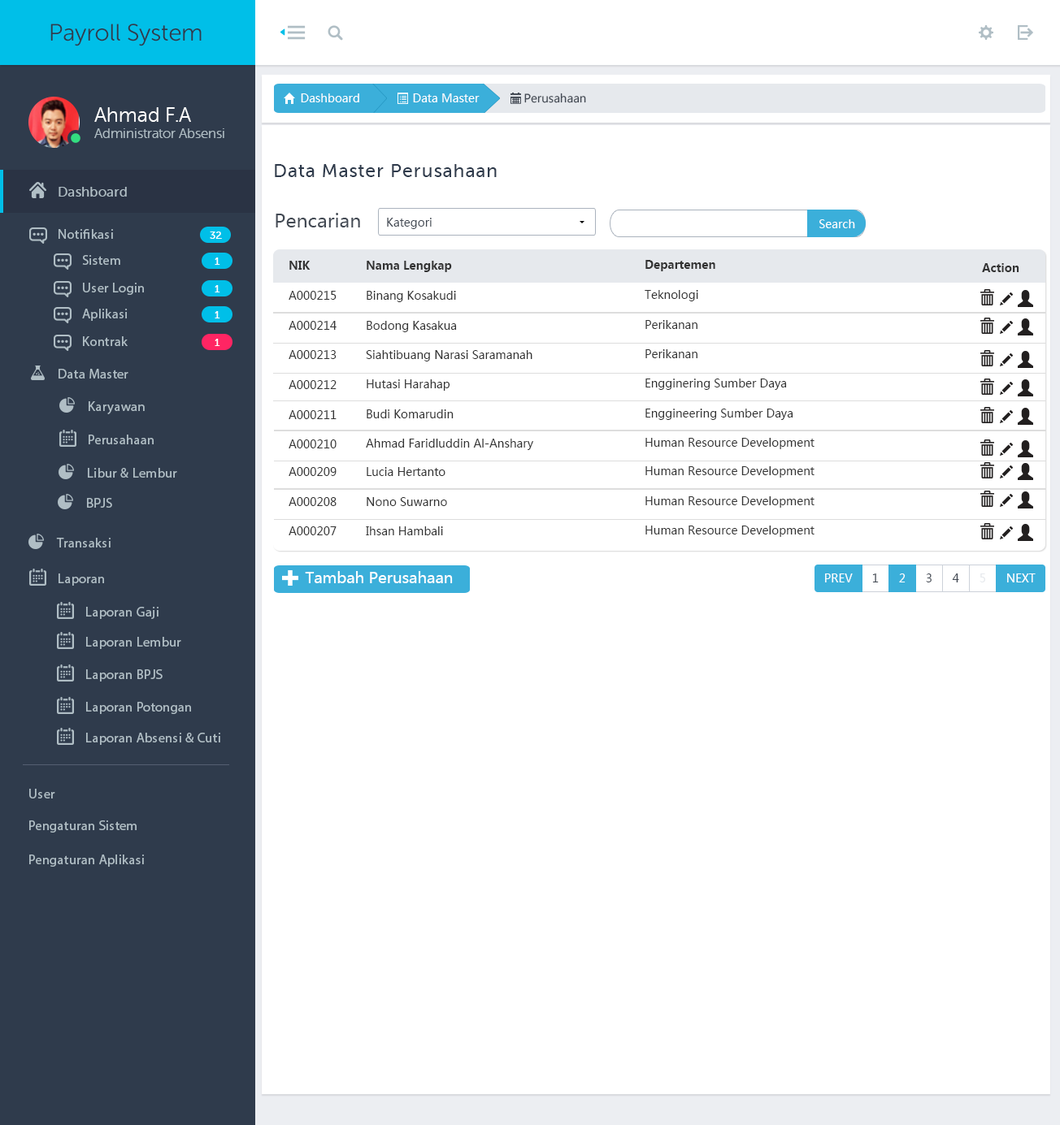
<style>
.page{position:relative;width:1060px;height:1125px;background:#ffffff}
.page>*{position:absolute;margin:0}
.t1{font:23.7px "MuseoSansRounded-300";color:#2f3b4c}
.t2{font:11.4px "MicrosoftYaHei";color:#ffffff}
.t3{font:11.2px "MicrosoftYaHei";color:#434a54}
.t4{font:13.5px "MuseoSansRounded-300";color:#b0bec5}
.t5{font:20.3px "MuseoSansRounded-300";color:#ffffff}
.t6{font:18.6px "MuseoSans-500";letter-spacing:0.04em;color:#2f3b4c}
.t7{font:13.5px "MuseoSans-500";letter-spacing:0.02em;color:#b0bec5}
.t8{font:18.6px "MicrosoftYaHei";color:#434a54}
.t9{font:11.4px "MicrosoftYaHei";color:#434a54}
.t10{font:13.5px "MyriadPro-Regular";letter-spacing:0.02em;color:#b0bec5}
.t11{font:10.2px "MuseoSans-500";letter-spacing:0.02em;color:#ffffff}
.t12{font:11.4px "MicrosoftYaHei-Bold";color:#333333}
.t13{font:11.4px "MicrosoftYaHei";color:#333333}
.t14{font:15.2px "MicrosoftYaHei";color:#ffffff}
.t15{font:11.4px "MicrosoftYaHei";color:#e6e9ed}
</style>
<div class="page">
<p class="t1" style="left:50px;top:24px;width:152px;height:22px">Payroll System</p>
<p class="t2" style="left:301px;top:93px;width:58px;height:9px">Dashboard</p>
<p class="t2" style="left:413px;top:93px;width:66px;height:9px">Data Master</p>
<p class="t3" style="left:524px;top:93px;width:62px;height:10px">Perusahaan</p>
<p class="t4" style="left:94px;top:107px;width:130px;height:31px"><span class="t5">Ahmad F.A <br></span>Administrator Absensi</p>
<p class="t6" style="left:275px;top:164px;width:221px;height:13px">Data Master Perusahaan</p>
<p class="t7" style="left:59px;top:187px;width:68px;height:10px">Dashboard</p>
<p class="t8" style="left:275px;top:213px;width:85px;height:15px">Pencarian</p>
<p class="t9" style="left:387px;top:218px;width:44px;height:11px">Kategori</p>
<p class="t2" style="left:819px;top:219px;width:36px;height:9px">Search</p>
<p class="t10" style="left:59px;top:229px;width:54px;height:10px">Notifikasi</p>
<p class="t11" style="left:210px;top:232px;width:12px;height:7px">32</p>
<p class="t10" style="left:82px;top:255px;width:38px;height:10px">Sistem</p>
<p class="t11" style="left:215px;top:258px;width:5px;height:7px">1</p>
<p class="t12" style="left:289px;top:261px;width:21px;height:9px">NIK</p>
<p class="t12" style="left:366px;top:261px;width:86px;height:11px">Nama Lengkap</p>
<p class="t12" style="left:645px;top:260px;width:70px;height:11px">Departemen</p>
<p class="t12" style="left:982px;top:263px;width:37px;height:9px">Action</p>
<p class="t10" style="left:83px;top:283px;width:61px;height:12px">User Login</p>
<p class="t11" style="left:215px;top:285px;width:5px;height:8px">1</p>
<p class="t13" style="left:288px;top:291px;width:48px;height:9px">A000215</p>
<p class="t13" style="left:366px;top:291px;width:90px;height:11px">Binang Kosakudi</p>
<p class="t13" style="left:644px;top:290px;width:54px;height:11px">Teknologi</p>
<p class="t10" style="left:82px;top:309px;width:46px;height:12px">Aplikasi</p>
<p class="t11" style="left:215px;top:311px;width:5px;height:8px">1</p>
<p class="t13" style="left:288px;top:321px;width:48px;height:9px">A000214</p>
<p class="t13" style="left:366px;top:321px;width:91px;height:11px">Bodong Kasakua</p>
<p class="t13" style="left:645px;top:320px;width:52px;height:9px">Perikanan</p>
<p class="t10" style="left:83px;top:336px;width:45px;height:10px">Kontrak</p>
<p class="t11" style="left:215px;top:339px;width:5px;height:7px">1</p>
<p class="t13" style="left:288px;top:350px;width:48px;height:9px">A000213</p>
<p class="t13" style="left:366px;top:350px;width:166px;height:12px">Siahtibuang Narasi Saramanah</p>
<p class="t13" style="left:645px;top:349px;width:52px;height:9px">Perikanan</p>
<p class="t10" style="left:59px;top:369px;width:69px;height:10px">Data Master</p>
<p class="t13" style="left:288px;top:380px;width:48px;height:9px">A000212</p>
<p class="t13" style="left:366px;top:379px;width:84px;height:12px">Hutasi Harahap</p>
<p class="t13" style="left:645px;top:379px;width:142px;height:11px">Engginering Sumber Daya</p>
<p class="t10" style="left:89px;top:401px;width:56px;height:13px">Karyawan</p>
<p class="t13" style="left:288px;top:410px;width:48px;height:9px">A000211</p>
<p class="t13" style="left:366px;top:410px;width:87px;height:8px">Budi Komarudin</p>
<p class="t13" style="left:645px;top:409px;width:148px;height:11px">Enggineering Sumber Daya</p>
<p class="t10" style="left:89px;top:435px;width:65px;height:9px">Perusahaan</p>
<p class="t13" style="left:645px;top:438px;width:169px;height:11px">Human Resource Development</p>
<p class="t13" style="left:288px;top:440px;width:48px;height:9px">A000210</p>
<p class="t13" style="left:366px;top:439px;width:167px;height:11px">Ahmad Faridluddin Al-Anshary</p>
<p class="t10" style="left:88px;top:468px;width:89px;height:10px">Libur &amp; Lembur</p>
<p class="t13" style="left:288px;top:467px;width:48px;height:9px">A000209</p>
<p class="t13" style="left:366px;top:467px;width:79px;height:9px">Lucia Hertanto</p>
<p class="t13" style="left:645px;top:466px;width:169px;height:12px">Human Resource Development</p>
<p class="t13" style="left:288px;top:497px;width:48px;height:9px">A000208</p>
<p class="t13" style="left:366px;top:497px;width:81px;height:9px">Nono Suwarno</p>
<p class="t13" style="left:645px;top:496px;width:169px;height:12px">Human Resource Development</p>
<p class="t10" style="left:87px;top:498px;width:25px;height:10px">BPJS</p>
<p class="t13" style="left:288px;top:527px;width:48px;height:8px">A000207</p>
<p class="t13" style="left:366px;top:527px;width:77px;height:8px">Ihsan Hambali</p>
<p class="t13" style="left:645px;top:526px;width:169px;height:11px">Human Resource Development</p>
<p class="t10" style="left:56px;top:538px;width:55px;height:10px">Transaksi</p>
<p class="t10" style="left:59px;top:574px;width:45px;height:12px">Laporan</p>
<p class="t14" style="left:305px;top:571px;width:148px;height:12px">Tambah Perusahaan</p>
<p class="t2" style="left:825px;top:574px;width:27px;height:9px">PREV</p>
<p class="t9" style="left:872px;top:574px;width:6px;height:9px">1</p>
<p class="t2" style="left:899px;top:574px;width:6px;height:9px">2</p>
<p class="t9" style="left:926px;top:574px;width:5px;height:9px">3</p>
<p class="t9" style="left:952px;top:574px;width:7px;height:9px">4</p>
<p class="t15" style="left:979px;top:574px;width:6px;height:9px">5</p>
<p class="t2" style="left:1007px;top:574px;width:28px;height:9px">NEXT</p>
<p class="t10" style="left:86px;top:607px;width:72px;height:12px">Laporan Gaji</p>
<p class="t10" style="left:86px;top:637px;width:95px;height:12px">Laporan Lembur</p>
<p class="t10" style="left:86px;top:670px;width:77px;height:12px">Laporan BPJS</p>
<p class="t10" style="left:86px;top:702px;width:105px;height:12px">Laporan Potongan</p>
<p class="t10" style="left:86px;top:733px;width:134px;height:12px">Laporan Absensi &amp; Cuti</p>
<p class="t10" style="left:29px;top:789px;width:26px;height:10px">User</p>
<p class="t10" style="left:29px;top:821px;width:108px;height:12px">Pengaturan Sistem</p>
<p class="t10" style="left:29px;top:855px;width:115px;height:12px">Pengaturan Aplikasi</p>
</div>
